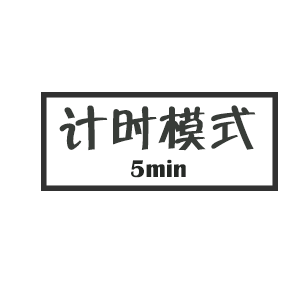
<style>
.page{position:relative;width:300px;height:300px;background:#ffffff}
.page>*{position:absolute;margin:0}
.t1{font:50px "FZZBHJW--GB1-0";color:#383c38}
.t2{font:25px "BritannicBold";color:#252825}
</style>
<div class="page">
<p class="t1" style="left:59px;top:105px;width:197px;height:46px">计时模式</p>
<p class="t2" style="left:131px;top:159px;width:55px;height:19px">5min</p>
</div>
